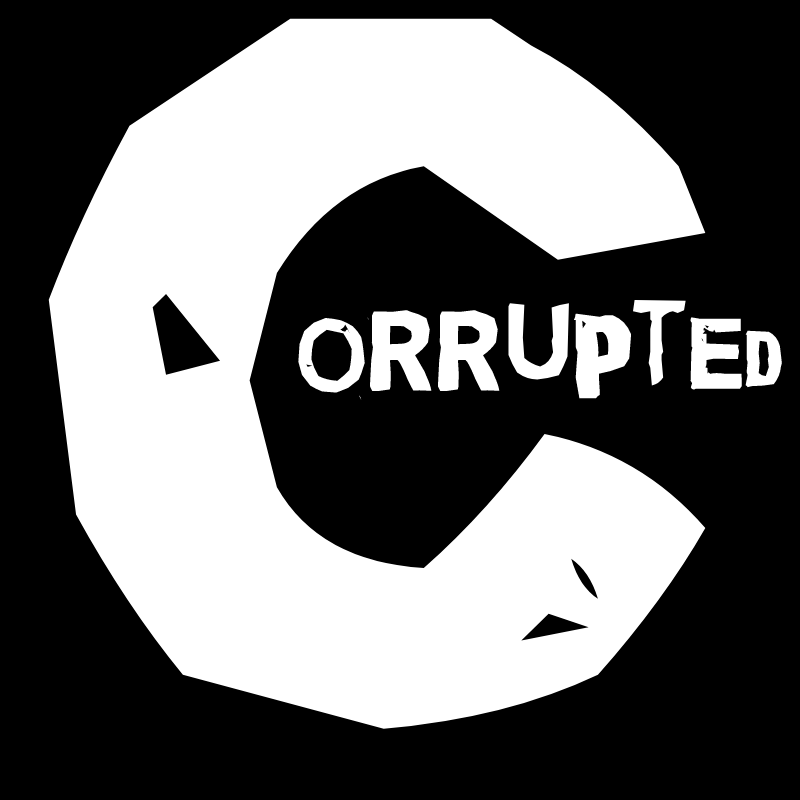
<style>
.page{position:relative;width:800px;height:800px;background:#000000}
.page>*{position:absolute;margin:0}
.t1{font:1188.9px "QuickEndJerk";color:#ffffff}
.t2{font:105.1px "QuickEndJerk";color:#ffffff}
</style>
<div class="page">
<p class="t1" style="left:48px;top:18px;width:658px;height:711px">C</p>
<p class="t2" style="left:298px;top:300px;width:484px;height:100px">orrupted</p>
</div>
